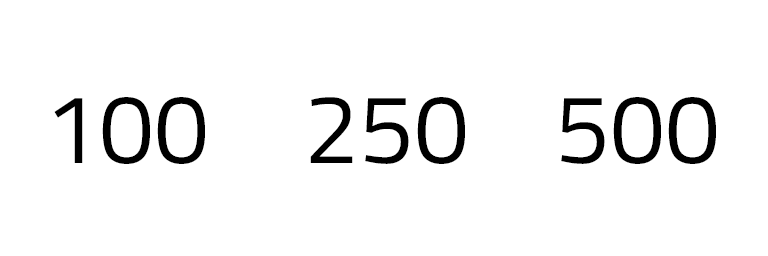
<style>
.page{position:relative;width:768px;height:256px;background:#ffffff}
.page>*{position:absolute;margin:0}
.t1{font:98.3px "TitilliumWeb-Regular";color:#000000}
</style>
<div class="page">
<p class="t1" style="left:54px;top:97px;width:151px;height:67px">100</p>
<p class="t1" style="left:310px;top:97px;width:155px;height:67px">250</p>
<p class="t1" style="left:561px;top:97px;width:155px;height:67px">500</p>
</div>
